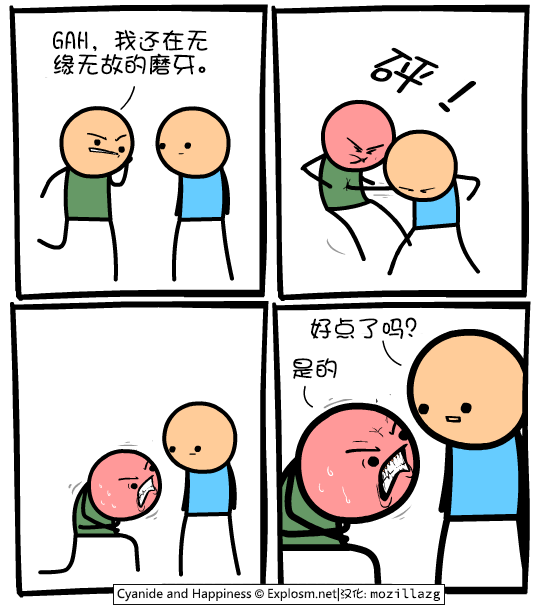
<style>
.page{position:relative;width:540px;height:610px;background:#ffffff}
.page>*{position:absolute;margin:0}
.t1{font:24px/24px "DFShaoNvW5";color:#000000}
.t2{font:53.7px "DFShaoNvW5";color:#000000;scale:1.11 1}
.t3{font:24px "DFShaoNvW5";color:#000000}
</style>
<div class="page">
<p class="t1" style="left:53px;top:29px;width:155px;height:46px">GAH, 我还在无<br>缘无故的磨牙。</p>
<p class="t2" style="left:370px;top:47px;width:106px;height:66px;rotate:23deg">砰！</p>
<p class="t3" style="left:310px;top:317px;width:107px;height:22px">好点了吗？</p>
<p class="t3" style="left:292px;top:358px;width:45px;height:21px">是的</p>
</div>
